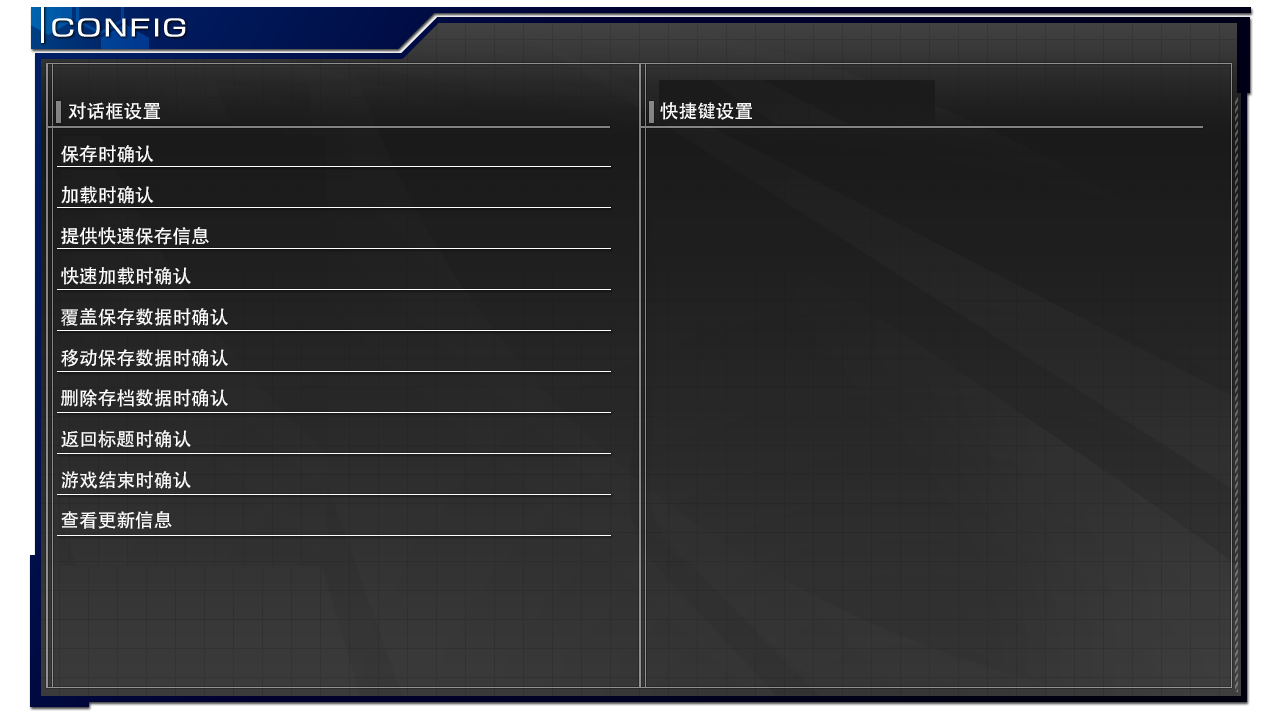
<style>
.page{position:relative;width:1280px;height:720px}
.page>*{position:absolute;margin:0}
.t1{font:18.7px "AdobeHeitiStd-Regular";color:#ffffff}
.t2{font:18.7px/40.7px "AdobeHeitiStd-Regular";color:#ffffff}
</style>
<div class="page">
<p class="t1" style="left:68px;top:102px;width:92px;height:18px">对话框设置</p>
<p class="t1" style="left:660px;top:102px;width:92px;height:18px">快捷键设置</p>
<p class="t2" style="left:61px;top:145px;width:167px;height:384px">保存时确认<br>加载时确认<br>提供快速保存信息<br>快速加载时确认<br>覆盖保存数据时确认<br>移动保存数据时确认<br>删除存档数据时确认<br>返回标题时确认<br>游戏结束时确认<br>查看更新信息</p>
</div>
